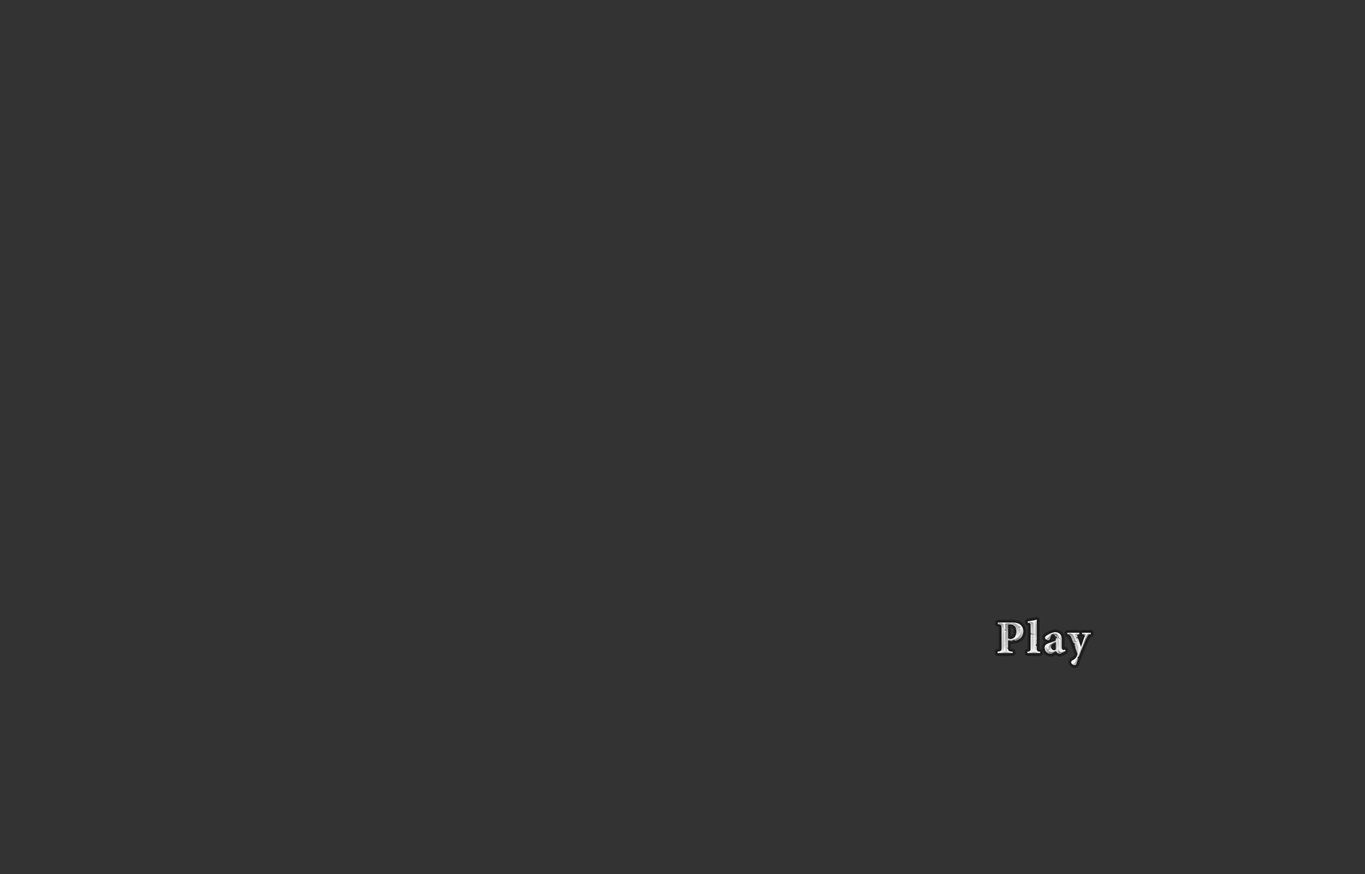
<style>
.page{position:relative;width:1365px;height:874px;background:#333333}
.page>*{position:absolute;margin:0}
.t1{font:47.4px "MinionPro-Bold";letter-spacing:0.05em}
</style>
<div class="page">
<p class="t1" style="left:998px;top:619px;width:93px;height:46px">Play</p>
</div>
